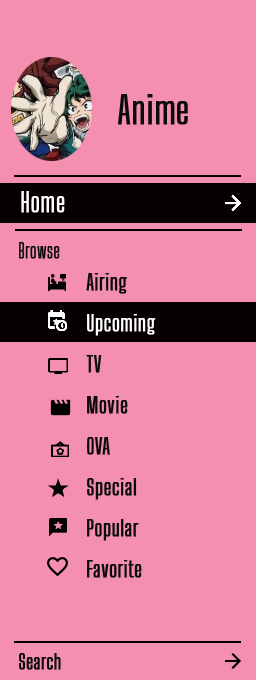
<style>
.page{position:relative;width:256px;height:680px;background:#f48fb0}
.page>*{position:absolute;margin:0}
.t1{font:37.5px "BigShouldersDisplay-Regular";color:#0c0c0c;font-weight:bold}
.t2{font:26px "BigShouldersDisplay-Regular";color:#ffffff;font-weight:bold}
.t3{font:20px "BigShouldersDisplay-Light";color:#0c0c0c;font-weight:bold}
.t4{font:22px/41px "BigShouldersDisplay-Regular";color:#0c0c0c;font-weight:bold}
.t5{font:22px/41px "BigShouldersDisplay-Regular";color:#ffffff;font-weight:bold}
.t6{font:20px "BigShouldersDisplay-Regular";color:#0c0c0c;font-weight:bold}
</style>
<div class="page">
<p class="t1" style="left:118px;top:94px;width:70px;height:31px">Anime</p>
<p class="t2" style="left:21px;top:191px;width:44px;height:22px">Home</p>
<p class="t3" style="left:19px;top:242px;width:41px;height:17px">Browse</p>
<p class="t4" style="left:86px;top:273px;width:70px;height:305px">Airing<br><span class="t5">Upcoming<br></span>TV<br>Movie<br>OVA<br>Special<br>Popular<br>Favorite</p>
<p class="t6" style="left:19px;top:653px;width:42px;height:17px">Search</p>
</div>
